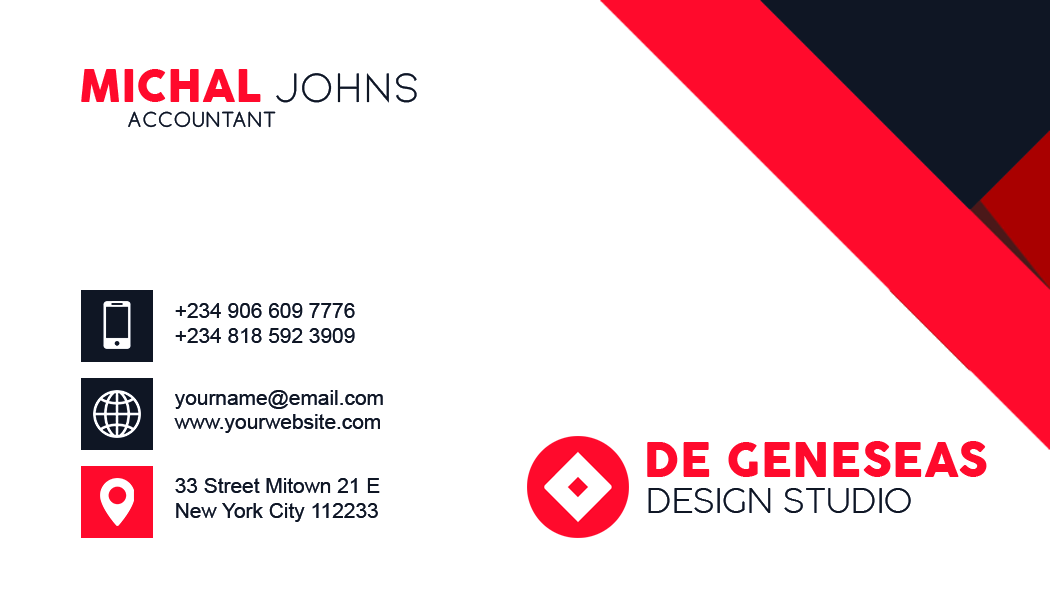
<style>
.page{position:relative;width:1050px;height:600px;background:#ffffff}
.page>*{position:absolute;margin:0}
.t1{font:43.7px "Cocogoose";color:#ff0a2c}
.t2{font:43.7px "Kiona-Regular";color:#0f1624}
.t3{font:19.5px "Comfortaa-Regular";letter-spacing:0.08em;color:#0f1624}
.t4{font:20.9px "ArialMT";color:#0f1624}
.t5{font:47.4px "COCOGOOSE";color:#ff0a2c}
.t6{font:33.4px "COCOGOOSE-UltraLight";color:#0f1624}
</style>
<div class="page">
<p class="t1" style="left:81px;top:69px;width:336px;height:34px">MICHAL <span class="t2">JOHNS</span></p>
<p class="t3" style="left:128px;top:111px;width:148px;height:17px">ACCOUNTANT</p>
<p class="t4" style="left:175px;top:303px;width:180px;height:15px">+234 906 609 7776</p>
<p class="t4" style="left:175px;top:328px;width:180px;height:15px">+234 818 592 3909</p>
<p class="t4" style="left:175px;top:390px;width:208px;height:19px">yourname@email.com</p>
<p class="t4" style="left:174px;top:414px;width:206px;height:19px">www.yourwebsite.com</p>
<p class="t5" style="left:647px;top:441px;width:340px;height:36px">DE GENESEAS</p>
<p class="t4" style="left:175px;top:478px;width:205px;height:44px">33 Street Mitown 21 E<br>New York City 112233</p>
<p class="t6" style="left:648px;top:488px;width:263px;height:25px">DESIGN STUDIO</p>
</div>
